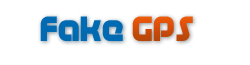
<style>
.page{position:relative;width:250px;height:65px;background:#ffffff}
.page>*{position:absolute;margin:0}
.t1{font:35px "Age";letter-spacing:0.025em;color:#006ab3}
.t2{font:35px "Age";letter-spacing:0.025em}
</style>
<div class="page">
<p class="t1" style="left:40px;top:16px;width:83px;height:25px">Fake</p>
<p class="t2" style="left:132px;top:16px;width:61px;height:25px">GPS</p>
</div>
